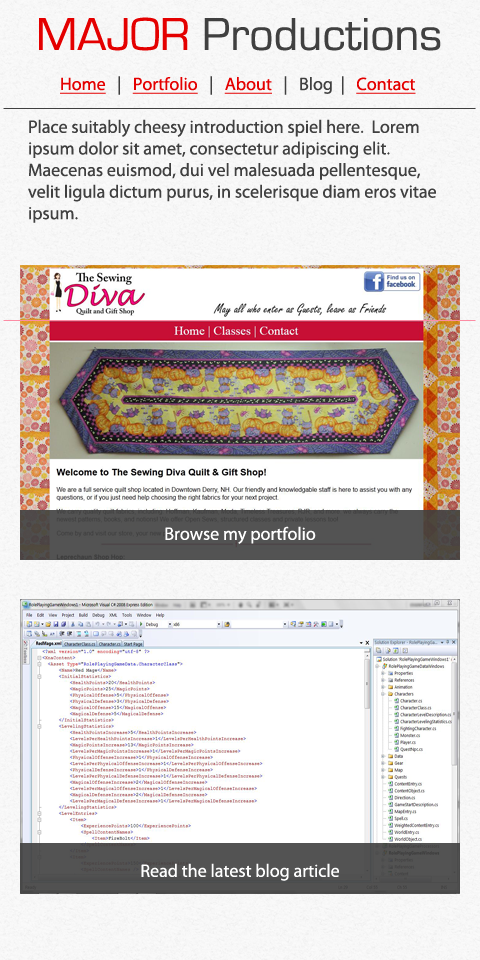
<style>
.page{position:relative;width:480px;height:960px}
.page>*{position:absolute;margin:0}
.t1{font:48px "EurostileRegular";color:#404040}
.t2{font:48px "EurostileRegular";color:#e40000}
.t3{font:18px "MyriadPro-Regular";color:#404040}
.t4{font:18px "MyriadPro-Regular";color:#e40000;text-decoration:underline}
.t5{font:18px "MyriadPro-Regular";color:#ffffff}
</style>
<div class="page">
<p class="t1" style="left:39px;top:17px;width:402px;height:34px"><span class="t2">MAJOR </span>Productions</p>
<p class="t3" style="left:60px;top:76px;width:356px;height:19px"><span class="t4">Home   </span>|   <span class="t4">Portfolio   </span>|   <span class="t4">About   </span>|   Blog  |   <span class="t4">Contact</span></p>
<p class="t3" style="left:28px;top:119px;width:408px;height:104px">Place suitably cheesy introduction spiel here.  Lorem ipsum dolor sit amet, consectetur adipiscing elit. Maecenas euismod, dui vel malesuada pellentesque, velit ligula dictum purus, in scelerisque diam eros vitae ipsum.</p>
<p class="t5" style="left:165px;top:526px;width:151px;height:18px">Browse my portfolio</p>
<p class="t5" style="left:141px;top:863px;width:198px;height:18px">Read the latest blog article</p>
</div>
